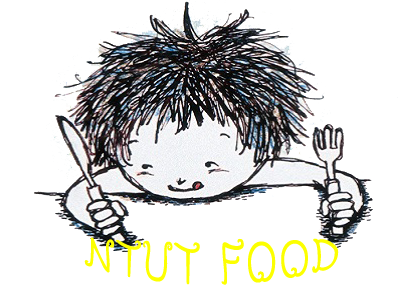
<style>
.page{position:relative;width:413px;height:300px;background:#ffffff}
.page>*{position:absolute;margin:0}
.t1{font:51.4px "DFMo-W4-WINP-BF";color:#fcff00}
</style>
<div class="page">
<p class="t1" style="left:84px;top:237px;width:255px;height:48px">NTUT FOOD</p>
</div>
